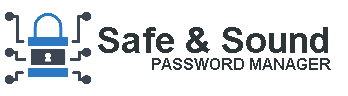
<style>
.page{position:relative;width:348px;height:96px;background:#ffffff}
.page>*{position:absolute;margin:0}
.t1{font:36px "Arial-BoldMT";color:#2d3538}
.t2{font:16px "Arial-BoldMT";color:#2d3538}
</style>
<div class="page">
<p class="t1" style="left:98px;top:27px;width:230px;height:26px">Safe &amp; Sound</p>
<p class="t2" style="left:152px;top:58px;width:179px;height:12px">PASSWORD MANAGER</p>
</div>
